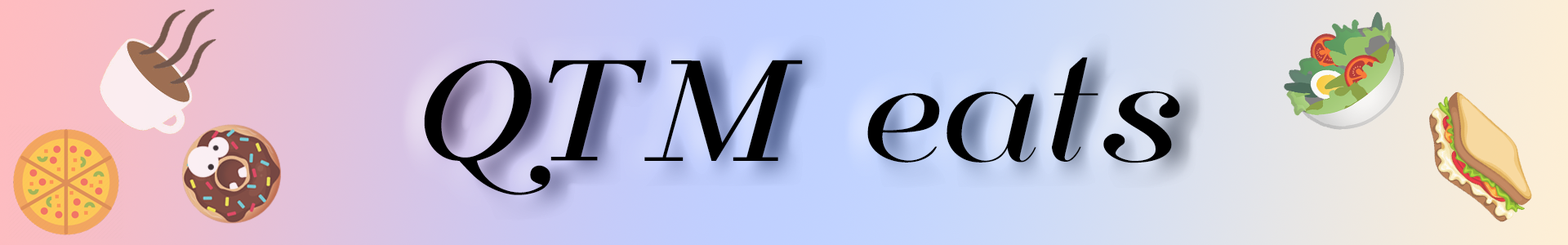
<style>
.page{position:relative;width:1568px;height:245px}
.page>*{position:absolute;margin:0}
.t1{font:145.4px "Florence-Regular";color:#000000}
</style>
<div class="page">
<p class="t1" style="left:424px;top:57px;width:756px;height:138px">QTM eats</p>
</div>
